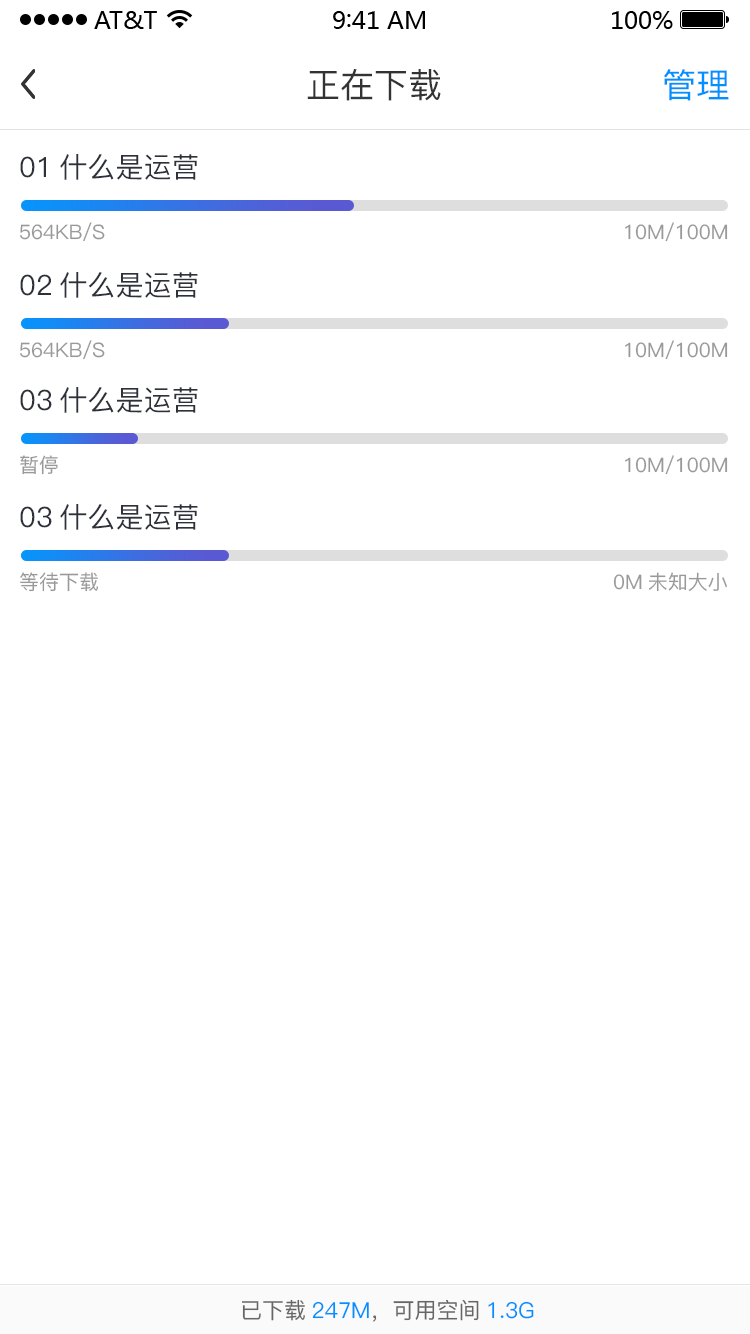
<style>
.page{position:relative;width:750px;height:1334px;background:#ffffff}
.page>*{position:absolute;margin:0}
.t1{font:34px "PingFang-SC-Medium";color:#333333}
.t2{font:34px "PingFang-SC-Medium";color:#0090ff}
.t3{font:28px "PingFang-SC-Medium";color:#2e313a}
.t4{font:20px "PingFang-SC-Medium";color:#999999}
.t5{font:22px "PingFang-SC-Medium";color:#666666}
.t6{font:22px "PingFang-SC-Medium";color:#0090ff}
</style>
<div class="page">
<p class="t1" style="left:307px;top:69px;width:134px;height:32px">正在下载</p>
<p class="t2" style="left:663px;top:69px;width:66px;height:32px">管理</p>
<p class="t3" style="left:20px;top:154px;width:178px;height:26px">01什么是运营</p>
<p class="t4" style="left:20px;top:222px;width:85px;height:20px">564KB/S</p>
<p class="t4" style="left:625px;top:222px;width:103px;height:20px">10M/100M</p>
<p class="t3" style="left:20px;top:272px;width:178px;height:26px">02什么是运营</p>
<p class="t4" style="left:20px;top:340px;width:85px;height:20px">564KB/S</p>
<p class="t4" style="left:625px;top:340px;width:103px;height:20px">10M/100M</p>
<p class="t3" style="left:20px;top:387px;width:178px;height:26px">03什么是运营</p>
<p class="t4" style="left:20px;top:455px;width:38px;height:20px">暂停</p>
<p class="t4" style="left:625px;top:455px;width:103px;height:20px">10M/100M</p>
<p class="t3" style="left:20px;top:504px;width:178px;height:26px">03什么是运营</p>
<p class="t4" style="left:20px;top:572px;width:79px;height:20px">等待下载</p>
<p class="t4" style="left:613px;top:572px;width:114px;height:20px">0M未知大小</p>
<p class="t5" style="left:242px;top:1299px;width:292px;height:23px">已下载<span class="t6">247M</span>，可用空间<span class="t6">1.3G</span></p>
</div>
